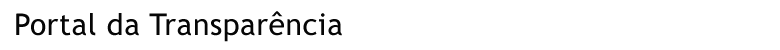
<style>
.page{position:relative;width:780px;height:50px;background:#ffffff}
.page>*{position:absolute;margin:0}
.t1{font:30px "TrebuchetMS";letter-spacing:0.02em;color:#060606}
</style>
<div class="page">
<p class="t1" style="left:16px;top:11px;width:326px;height:31px">Portal da Transparência</p>
</div>
